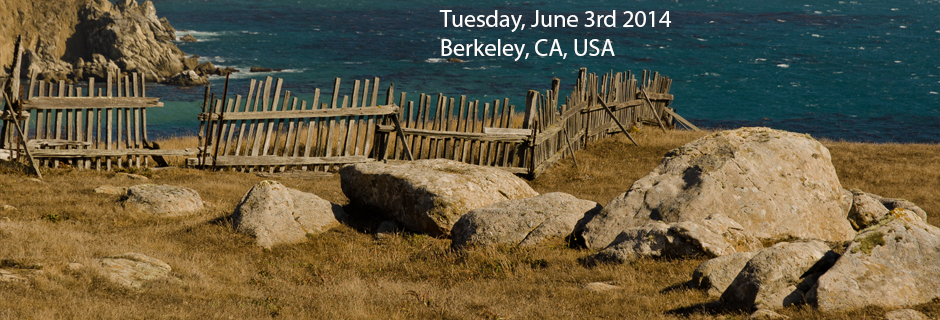
<style>
.page{position:relative;width:940px;height:320px}
.page>*{position:absolute;margin:0}
.t1{font:24px "MyriadPro-Regular";color:#fdfdfd}
</style>
<div class="page">
<p class="t1" style="left:439px;top:10px;width:233px;height:51px">Tuesday, June 3rd 2014<br>Berkeley, CA, USA</p>
</div>
